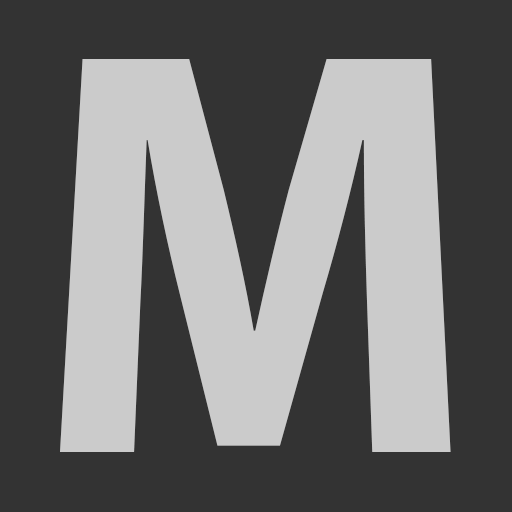
<style>
.page{position:relative;width:512px;height:512px;background:#333333}
.page>*{position:absolute;margin:0}
.t1{font:583.3px "MyriadPro-Bold";color:#cccccc;font-variant:small-caps;scale:0.9 1}
</style>
<div class="page">
<p class="t1" style="left:60px;top:59px;width:391px;height:393px">M</p>
</div>
